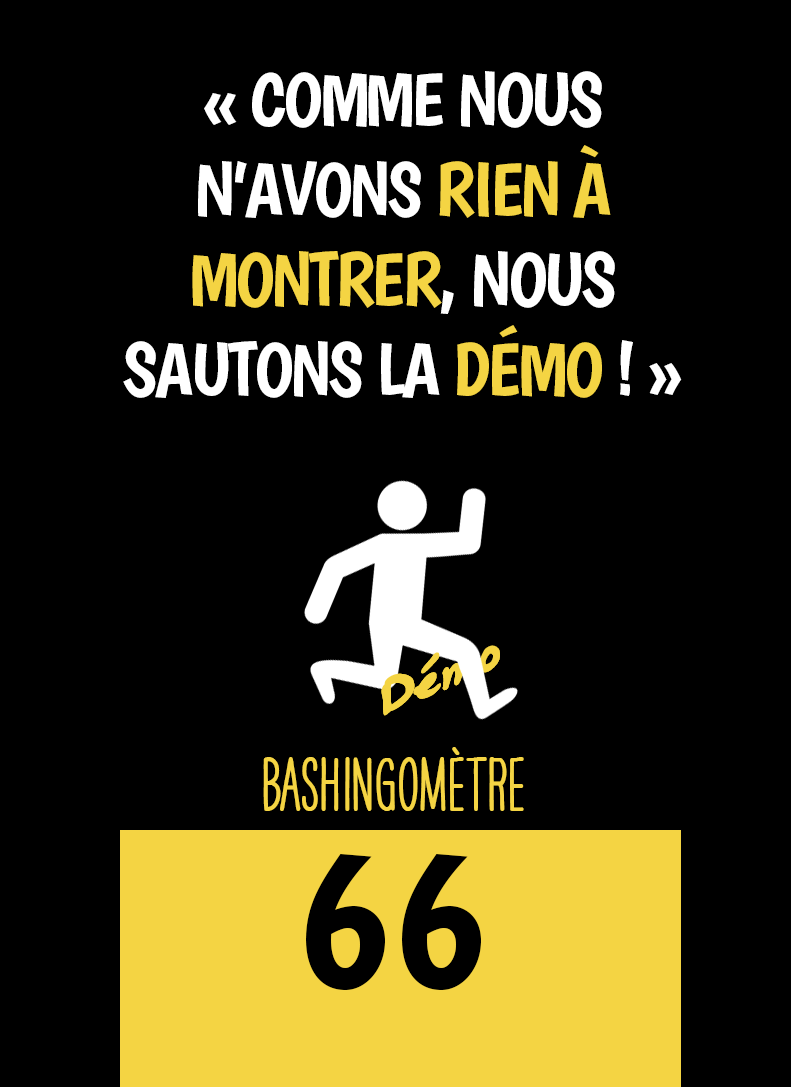
<style>
.page{position:relative;width:791px;height:1087px;background:#000000}
.page>*{position:absolute;margin:0}
.t1{font:75px "Boogaloo-Regular";letter-spacing:-0.04em;color:#ffffff}
.t2{font:75px "Boogaloo-Regular";letter-spacing:-0.04em;color:#f4d443}
.t3{font:62.5px "OakStreetW01-Regular";color:#f4d443}
.t4{font:66.7px "HAVEANICEDAYTallW04-Bold";color:#f4d443}
.t5{font:200px "Boogaloo-Regular";color:#000000}
</style>
<div class="page">
<p class="t1" style="left:123px;top:71px;width:559px;height:327px;text-align:center">« COMME NOUS N’AVONS <span class="t2">RIEN À MONTRER</span>, NOUS SAUTONS LA <span class="t2">DÉMO </span>! »</p>
<p class="t3" style="left:381px;top:645px;width:119px;height:71px;rotate:-23deg">Démo</p>
<p class="t4" style="left:263px;top:747px;width:261px;height:64px">BASHINgomètre</p>
<p class="t5" style="left:306px;top:854px;width:175px;height:136px">66</p>
</div>
